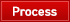
<style>
.page{position:relative;width:70px;height:22px}
.page>*{position:absolute;margin:0}
.t1{font:12px "HCRDotum-Bold";color:#ffffff}
</style>
<div class="page">
<p class="t1" style="left:13px;top:6px;width:44px;height:10px">Process</p>
</div>
